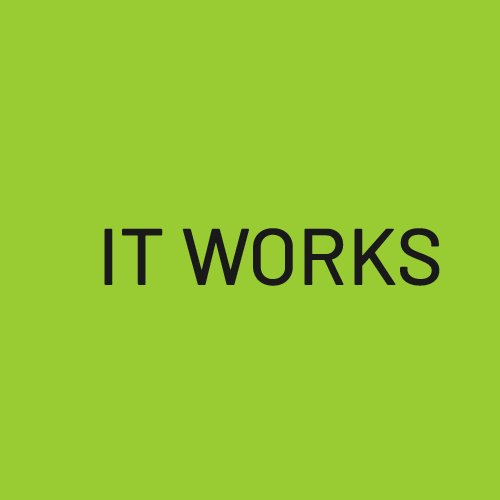
<style>
.page{position:relative;width:500px;height:500px;background:#99cc33}
.page>*{position:absolute;margin:0}
.t1{font:80.3px "Barlow-Medium";color:#1a191a}
</style>
<div class="page">
<p class="t1" style="left:104px;top:228px;width:336px;height:58px">IT WORKS</p>
</div>
